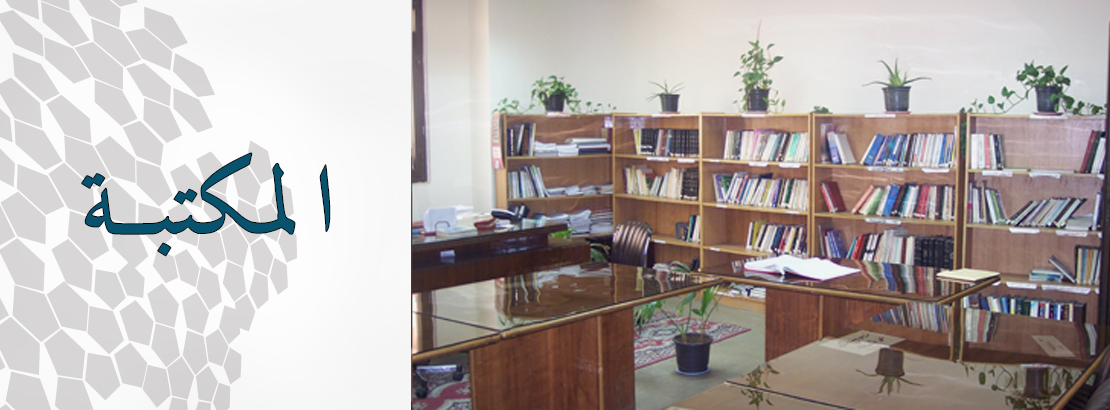
<style>
.page{position:relative;width:1110px;height:410px}
.page>*{position:absolute;margin:0}
.t1{font:95.6px "Amiri-Bold";letter-spacing:0.02em;color:#08526d}
</style>
<div class="page">
<p class="t1" style="left:81px;top:152px;width:250px;height:105px">المكتبــة</p>
</div>
